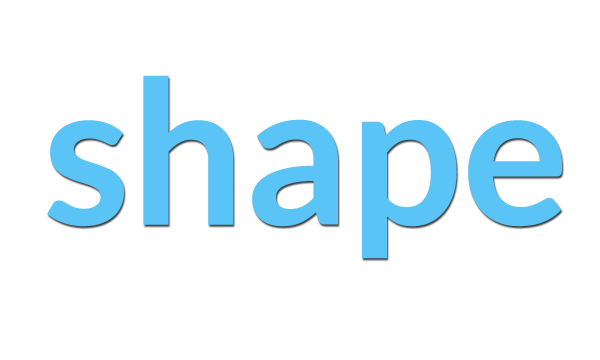
<style>
.page{position:relative;width:600px;height:360px;background:#ffffff}
.page>*{position:absolute;margin:0}
.t1{font:200px "Lato-Bold";color:#5ac4f6}
</style>
<div class="page">
<p class="t1" style="left:47px;top:75px;width:516px;height:184px">shape</p>
</div>
